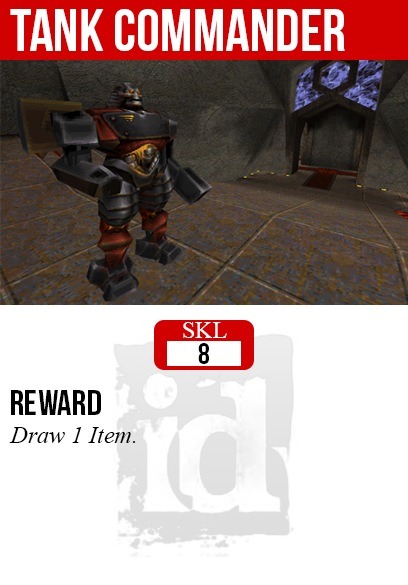
<style>
.page{position:relative;width:408px;height:585px;background:#ffffff}
.page>*{position:absolute;margin:0}
.t1{font:60px "BebasNeue";color:#ffffff}
.t2{font:24px "TimesNewRomanPSMT";color:#ffffff}
.t3{font:30px "BebasNeue";color:#000000}
.t4{font:36px "BebasNeue";color:#000000}
.t5{font:24px "TimesNewRomanPS-ItalicMT";color:#000000}
</style>
<div class="page">
<p class="t1" style="left:10px;top:9px;width:335px;height:42px">tank commander</p>
<p class="t2" style="left:183px;top:322px;width:44px;height:16px">SKL</p>
<p class="t3" style="left:198px;top:343px;width:11px;height:21px">8</p>
<p class="t4" style="left:11px;top:390px;width:90px;height:25px">reward</p>
<p class="t5" style="left:9px;top:427px;width:127px;height:16px">Draw 1 Item.</p>
</div>
